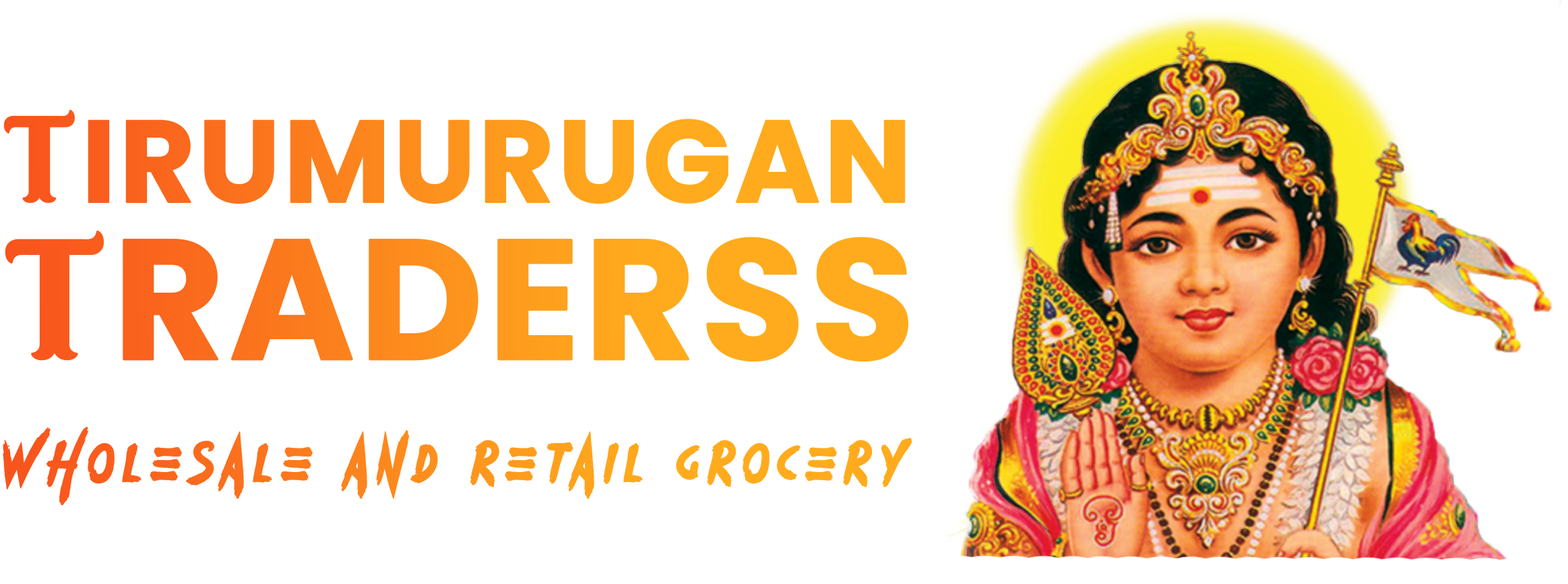
<style>
.page{position:relative;width:1568px;height:584px;background:#ffffff}
.page>*{position:absolute;margin:0}
.t1{font:69.4px/94.6px "Heatwave";letter-spacing:0.1em;font-weight:bold}
.t2{font:122.5px "BahemothRegular";text-transform:uppercase;font-weight:bold}
.t3{font:116.5px "Poppins-Bold";text-transform:uppercase;font-weight:bold}
.t4{font:170.5px/157.2px "BahemothRegular";text-transform:uppercase;font-weight:bold}
.t5{font:170.5px/157.2px "Poppins-Bold";text-transform:uppercase;font-weight:bold}
.t6{font:69.4px/127.6px "Heatwave";letter-spacing:0.1em;font-weight:bold}
</style>
<div class="page">
<p class="t1" style="left:3px;top:109px;width:909px;height:396px"><span class="t2">t</span><span class="t3">irumurugan<br></span><span class="t4">t</span><span class="t5">raderss<br></span>Wholesale and Retail groc<span class="t6">e</span>ry</p>
</div>
